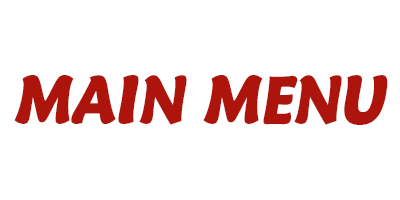
<style>
.page{position:relative;width:400px;height:200px;background:#ffffff}
.page>*{position:absolute;margin:0}
.t1{font:67.8px "MaiandraGD-Black";color:#ad140c;font-style:italic;scale:0.82 1}
</style>
<div class="page">
<p class="t1" style="left:14px;top:75px;width:374px;height:50px">MAIN MENU</p>
</div>
